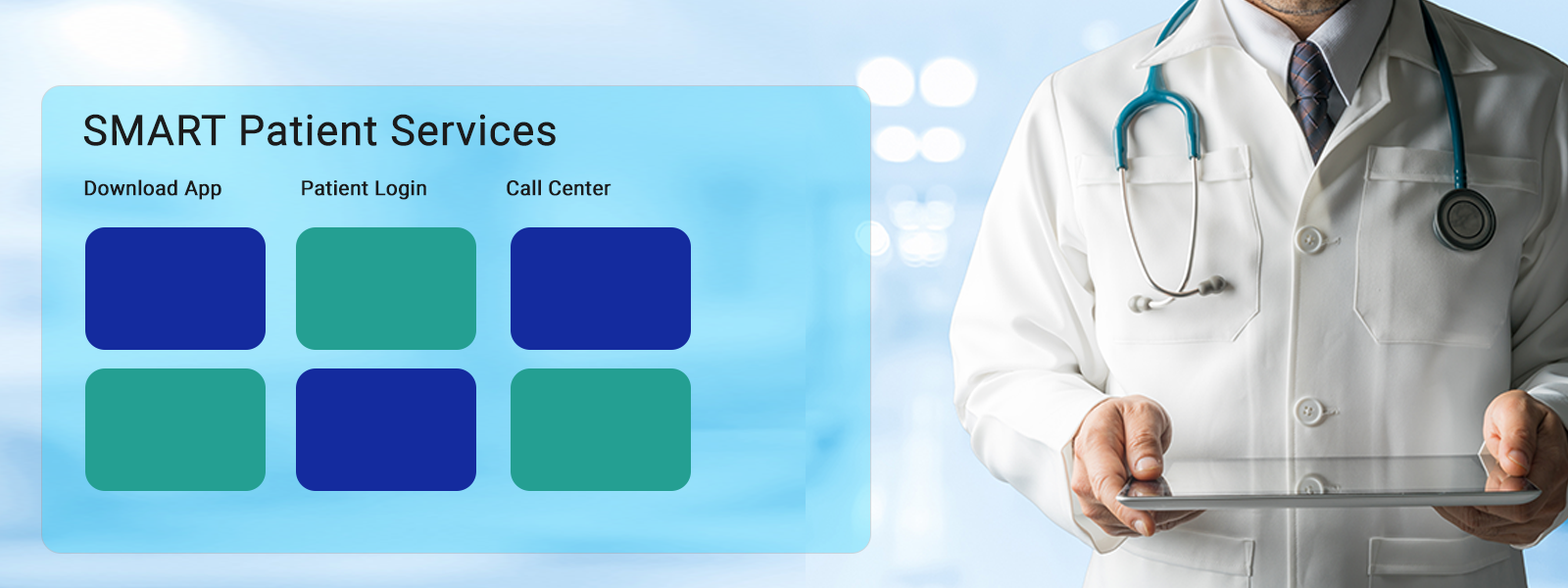
<style>
.page{position:relative;width:1568px;height:588px}
.page>*{position:absolute;margin:0}
.t1{font:42.2px "Roboto-Regular";color:#1b1b1b;font-weight:bold}
.t2{font:20.4px "Roboto-Regular";color:#1b1b1b;font-weight:bold}
</style>
<div class="page">
<p class="t1" style="left:83px;top:114px;width:473px;height:32px">SMART Patient Services</p>
<p class="t2" style="left:84px;top:179px;width:528px;height:21px">Download App              Patient Login              Call Center</p>
</div>
